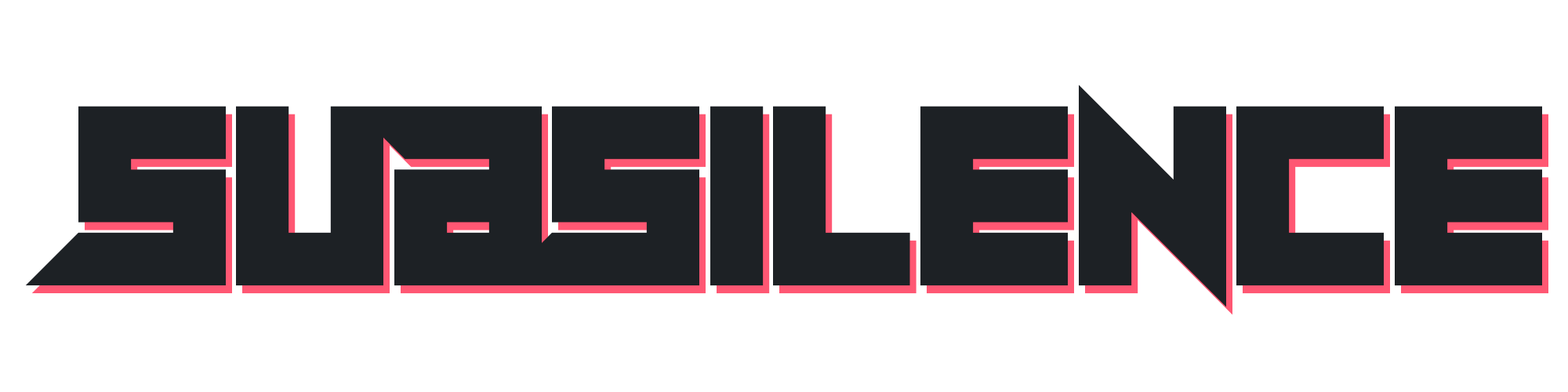
<style>
.page{position:relative;width:1568px;height:392px;background:#ffffff}
.page>*{position:absolute;margin:0}
.t1{font:215.6px "SheepingCatsStraight";color:#1d2125}
</style>
<div class="page">
<p class="t1" style="left:25px;top:85px;width:1517px;height:222px">SubSilence</p>
<p class="t1" style="left:31px;top:93px;width:1517px;height:222px">SubSilence</p>
</div>
